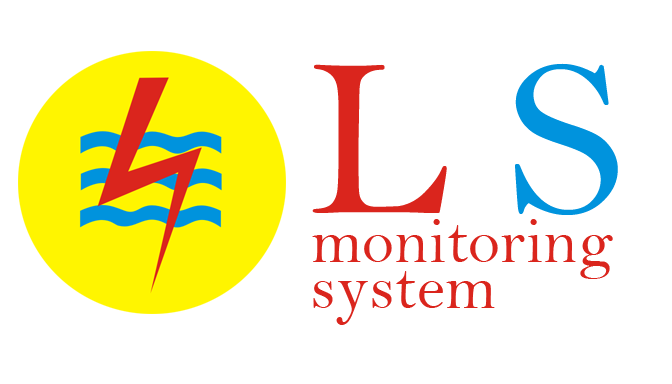
<style>
.page{position:relative;width:672px;height:384px;background:#ffffff}
.page>*{position:absolute;margin:0}
.t1{font:228.6px "BellMT";color:#da251d}
.t2{font:241.7px "BellMT";color:#da251d}
.t3{font:228.6px "BellMT";color:#0093dd}
.t4{font:65.3px "BellMT";color:#da251d}
</style>
<div class="page">
<p class="t1" style="left:312px;top:63px;width:306px;height:152px"><span class="t2"> </span>L <span class="t3">S</span></p>
<p class="t4" style="left:312px;top:219px;width:301px;height:60px">monitoring</p>
<p class="t4" style="left:313px;top:271px;width:182px;height:54px">system</p>
</div>
